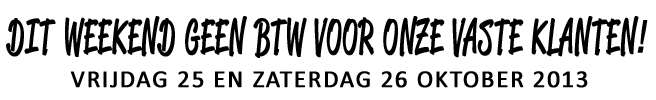
<style>
.page{position:relative;width:656px;height:100px;background:#ffffff}
.page>*{position:absolute;margin:0}
.t1{font:47.2px "ReklameScript-RegularDEMO";letter-spacing:0.05em;color:#000000;font-weight:bold;scale:0.68 1}
.t2{font:47.2px "Rockwell-Italic";letter-spacing:0.05em;color:#000000;font-weight:bold;scale:0.68 1}
.t3{font:24.6px "Calibri";letter-spacing:0.05em;color:#000000;font-weight:bold}
</style>
<div class="page">
<p class="t1" style="left:6px;top:16px;width:642px;height:42px">DIT WEEKEND GEEN BTW VOOR ONZE VASTE KLANTEN<span class="t2">!</span></p>
<p class="t3" style="left:70px;top:71px;width:518px;height:17px">VRIJDAG 25 EN ZATERDAG 26 OKTOBER 2013</p>
</div>
